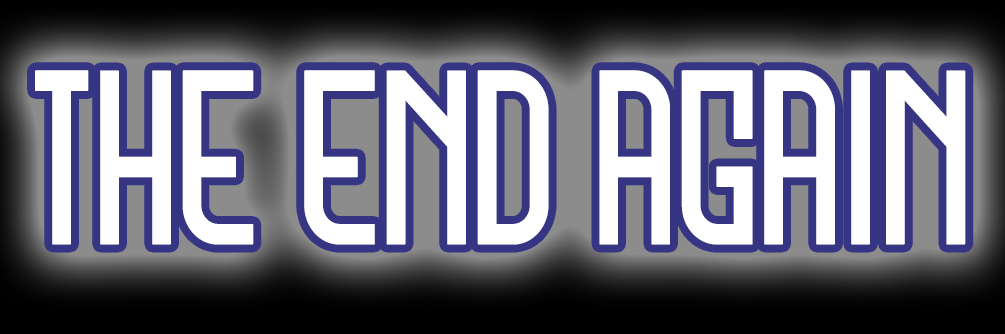
<style>
.page{position:relative;width:1005px;height:334px;background:#ffffff}
.page>*{position:absolute;margin:0}
.t1{font:192px "GLT-StarrySky-Regular";color:#ffffff;text-transform:uppercase;font-weight:bold;scale:0.9 1}
</style>
<div class="page">
<p class="t1" style="left:35px;top:70px;width:931px;height:175px">THE END AGAIn</p>
</div>
